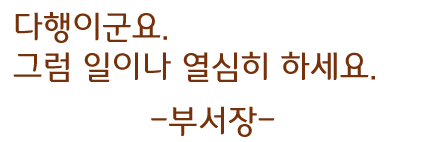
<style>
.page{position:relative;width:426px;height:142px;background:#ffffff}
.page>*{position:absolute;margin:0}
.t1{font:33px "DakiMTitle";color:#76300a}
</style>
<div class="page">
<p class="t1" style="left:13px;top:12px;width:362px;height:70px">다행이군요.<br>그럼 일이나 열심히 하세요.</p>
<p class="t1" style="left:151px;top:106px;width:124px;height:31px">-부서장-</p>
</div>
